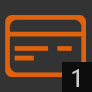
<style>
.page{position:relative;width:92px;height:92px;background:#333333}
.page>*{position:absolute;margin:0}
.t1{font:24px "MicrosoftYaHei";color:#cccccc}
</style>
<div class="page">
<p class="t1" style="left:72px;top:69px;width:7px;height:18px">1</p>
</div>
